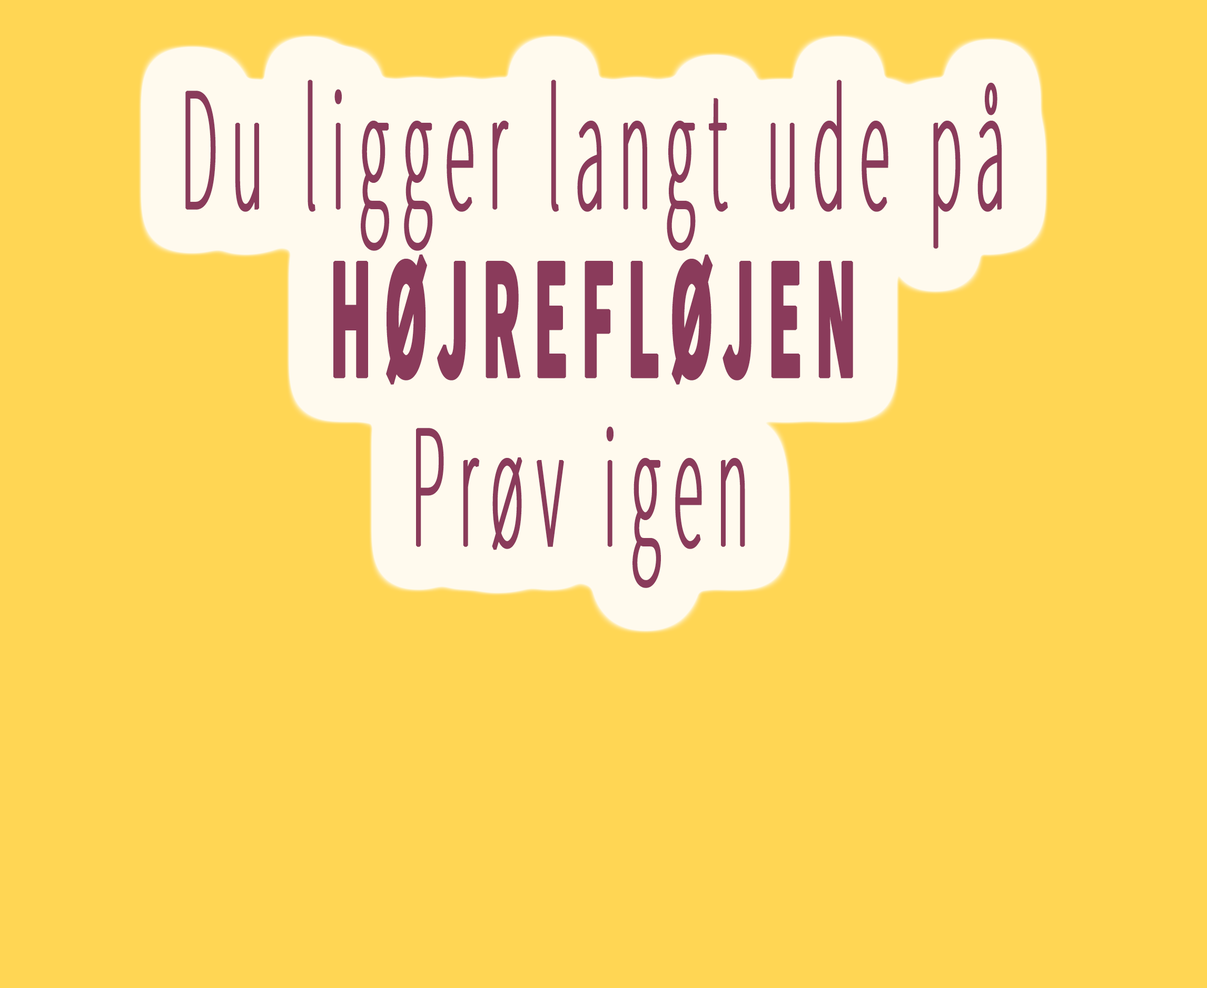
<style>
.page{position:relative;width:1207px;height:988px;background:#ffd654}
.page>*{position:absolute;margin:0}
.t1{font:175.6px "SourceSansPro-ExtraLight";letter-spacing:0.2em;color:#8a3b5b;font-weight:bold;scale:0.35 1}
.t2{font:175.6px "SourceSansPro-Bold";letter-spacing:0.2em;color:#8a3b5b;font-weight:bold;scale:0.35 1}
</style>
<div class="page">
<p class="t1" style="left:185px;top:80px;width:817px;height:508px;text-align:center">Du ligger langt ude på<br><br><br><br><br><br><br><br><span class="t2">HØJREFLØJEN<br></span><br><br><br><br><br><br><br>Prøv igen</p>
</div>
